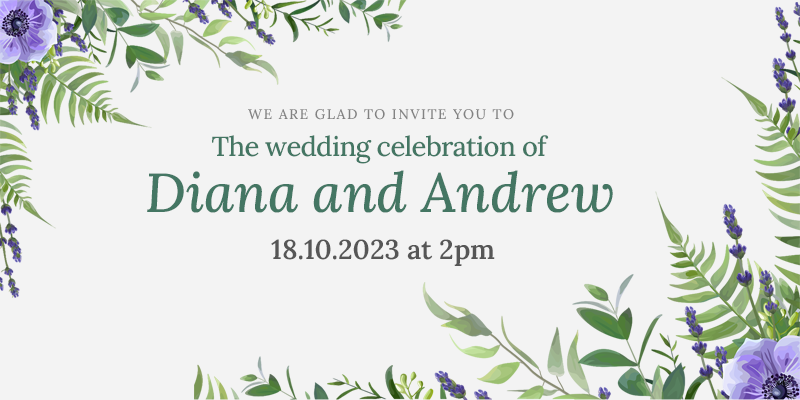
<style>
.page{position:relative;width:800px;height:400px;background:#f3f3f3}
.page>*{position:absolute;margin:0}
.t1{font:14px "Lora-Medium";letter-spacing:0.1em;color:#828282}
.t2{font:27.5px "Lora-Medium";letter-spacing:-0.025em;color:#447663}
.t3{font:55px "Lora-MediumItalic";color:#447663}
.t4{font:27.3px "Lora-SemiBold";color:#565656}
</style>
<div class="page">
<p class="t1" style="left:248px;top:109px;width:266px;height:11px">WE ARE GLAD TO INVITE YOU TO</p>
<p class="t2" style="left:212px;top:135px;width:337px;height:29px">The wedding celebration of</p>
<p class="t3" style="left:147px;top:170px;width:466px;height:43px">Diana and Andrew</p>
<p class="t4" style="left:271px;top:239px;width:224px;height:27px">18.10.2023 at 2pm</p>
</div>
